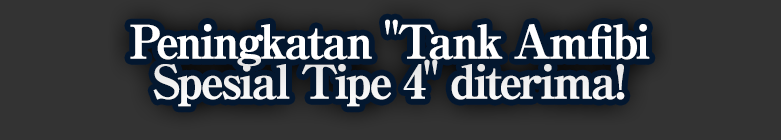
<style>
.page{position:relative;width:781px;height:140px;background:#333333}
.page>*{position:absolute;margin:0}
.t1{font:46px/40px "RyuminPro-ExBold";letter-spacing:-0.08em;color:#ffffff;font-weight:bold}
</style>
<div class="page">
<p class="t1" style="left:130px;top:19px;width:520px;height:88px;text-align:center">Peningkatan "Tank Amfibi<br>Spesial Tipe 4" diterima!</p>
</div>
